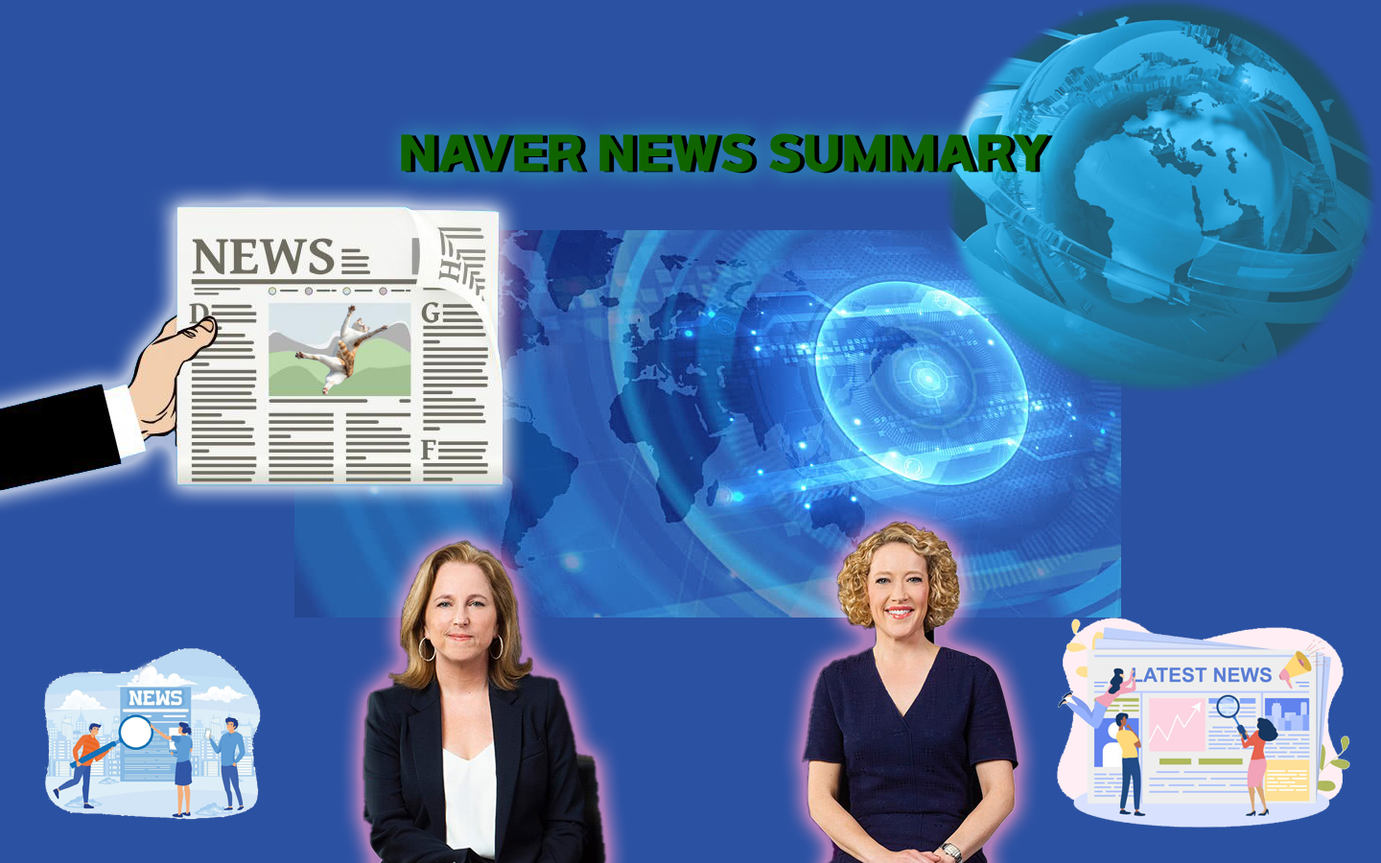
<style>
.page{position:relative;width:1381px;height:863px;background:#2b51a2}
.page>*{position:absolute;margin:0}
.t1{font:46px "SBAggroB";color:#106400}
.t2{font:46px "SBAggroB"}
</style>
<div class="page">
<p class="t1" style="left:401px;top:133px;width:647px;height:40px">NAVER NEWS SUMMARY</p>
<p class="t2" style="left:406px;top:134px;width:647px;height:40px">NAVER NEWS SUMMARY</p>
</div>
